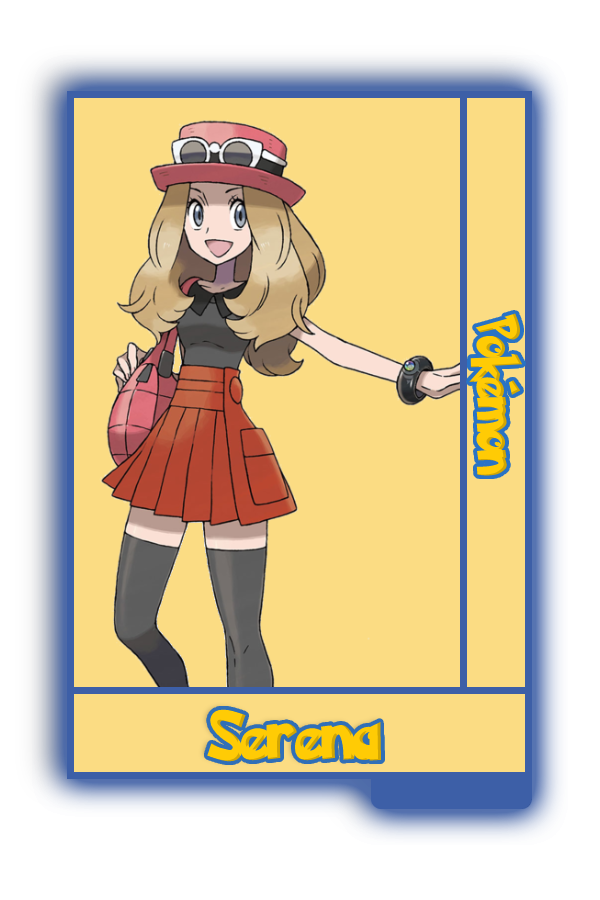
<style>
.page{position:relative;width:600px;height:900px;background:#fbdc83}
.page>*{position:absolute;margin:0}
.t1{font:48.8px "PokemonSolidNormal";color:#ffcb05;scale:0.8 1}
.t2{font:56.6px "PokemonSolidNormal";color:#ffcb05;scale:0.92 1}
</style>
<div class="page">
<p class="t1" style="left:469px;top:313px;width:54px;height:163px;rotate:90deg">Pokémon</p>
<p class="t2" style="left:207px;top:709px;width:175px;height:53px">Serena</p>
</div>
